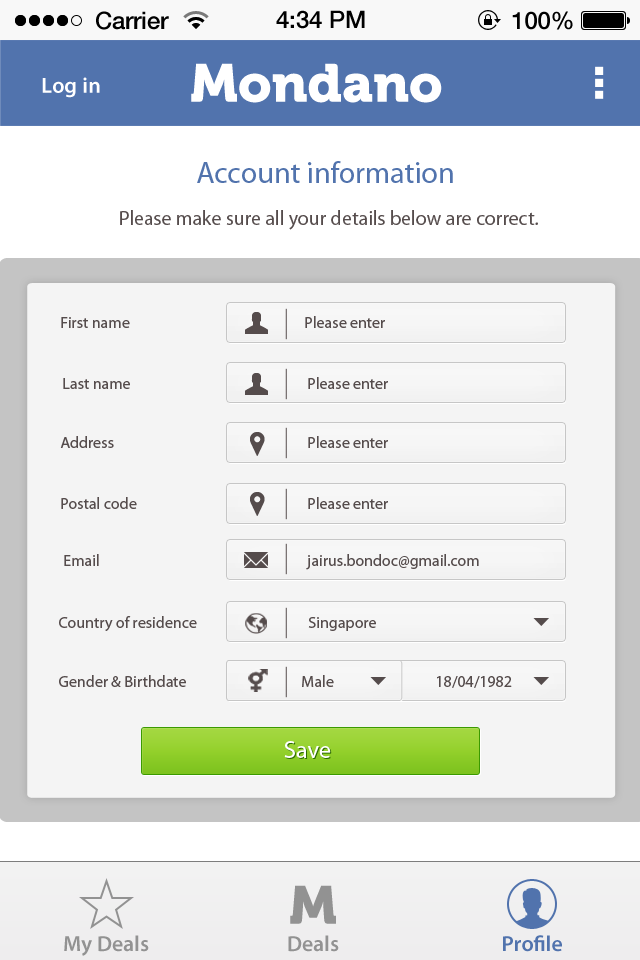
<style>
.page{position:relative;width:640px;height:960px;background:#f4f4f4}
.page>*{position:absolute;margin:0}
.t1{font:24px "HelveticaNeue-Medium";color:#000000}
.t2{font:53.3px "Museo900-Regular";color:#ffffff}
.t3{font:22px "MyriadPro-Semibold";color:#ffffff}
.t4{font:30px "MyriadPro-Regular";color:#5173ad}
.t5{font:20px "MyriadPro-Regular";color:#554c4c}
.t6{font:16px "MyriadPro-Regular";color:#554c4c}
.t7{font:24px "MyriadPro-Regular";color:#ffffff}
.t8{font:53.3px "Museo900-Regular";color:#929292}
.t9{font:22px "MyriadPro-Semibold";color:#929292}
.t10{font:22px "MyriadPro-Semibold";color:#5173ad}
</style>
<div class="page">
<p class="t1" style="left:96px;top:11px;width:73px;height:19px">Carrier</p>
<p class="t1" style="left:276px;top:10px;width:89px;height:19px">4:34 PM</p>
<p class="t1" style="left:512px;top:11px;width:61px;height:19px">100%</p>
<p class="t2" style="left:191px;top:63px;width:251px;height:40px">Mondano</p>
<p class="t3" style="left:42px;top:77px;width:58px;height:21px">Log in</p>
<p class="t4" style="left:197px;top:161px;width:256px;height:22px">Account information</p>
<p class="t5" style="left:120px;top:210px;width:418px;height:20px">Please make sure all your details below are correct.</p>
<p class="t6" style="left:61px;top:317px;width:69px;height:11px">First name</p>
<p class="t6" style="left:305px;top:316px;width:80px;height:12px">Please enter</p>
<p class="t6" style="left:308px;top:377px;width:80px;height:12px">Please enter</p>
<p class="t6" style="left:63px;top:378px;width:67px;height:11px">Last name</p>
<p class="t6" style="left:60px;top:436px;width:54px;height:12px">Address</p>
<p class="t6" style="left:308px;top:436px;width:80px;height:12px">Please enter</p>
<p class="t6" style="left:61px;top:497px;width:76px;height:12px">Postal code</p>
<p class="t6" style="left:308px;top:497px;width:80px;height:12px">Please enter</p>
<p class="t6" style="left:64px;top:554px;width:35px;height:12px">Email</p>
<p class="t6" style="left:306px;top:554px;width:173px;height:16px">jairus.bondoc@gmail.com</p>
<p class="t6" style="left:59px;top:616px;width:138px;height:15px">Country of residence</p>
<p class="t6" style="left:308px;top:617px;width:68px;height:14px">Singapore</p>
<p class="t6" style="left:59px;top:675px;width:127px;height:12px">Gender &amp; Birthdate</p>
<p class="t6" style="left:302px;top:675px;width:32px;height:12px">Male</p>
<p class="t6" style="left:437px;top:676px;width:75px;height:12px">18/04/1982</p>
<p class="t7" style="left:284px;top:741px;width:47px;height:17px">Save</p>
<p class="t8" style="left:290px;top:885px;width:46px;height:39px">M</p>
<p class="t9" style="left:64px;top:935px;width:85px;height:21px">My Deals</p>
<p class="t9" style="left:288px;top:935px;width:51px;height:17px">Deals</p>
<p class="t10" style="left:503px;top:935px;width:59px;height:17px">Profile</p>
</div>
